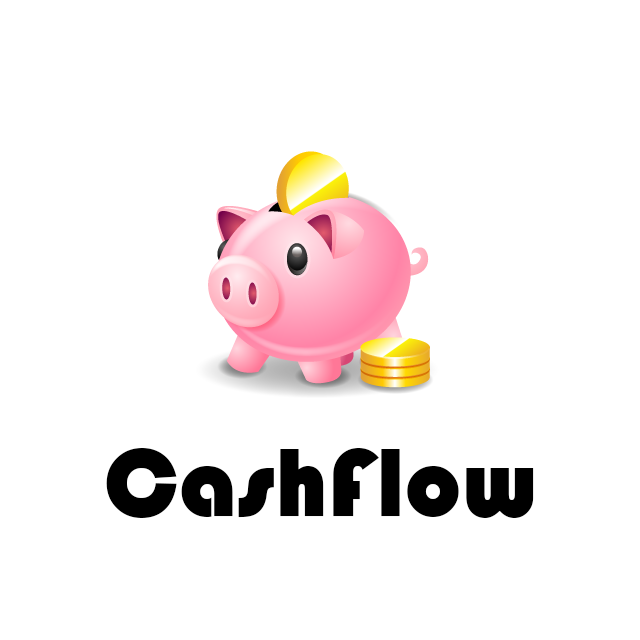
<style>
.page{position:relative;width:640px;height:640px;background:#ffffff}
.page>*{position:absolute;margin:0}
.t1{font:100px "Bauhaus93";color:#000000}
</style>
<div class="page">
<p class="t1" style="left:106px;top:448px;width:428px;height:70px">CashFlow</p>
</div>
